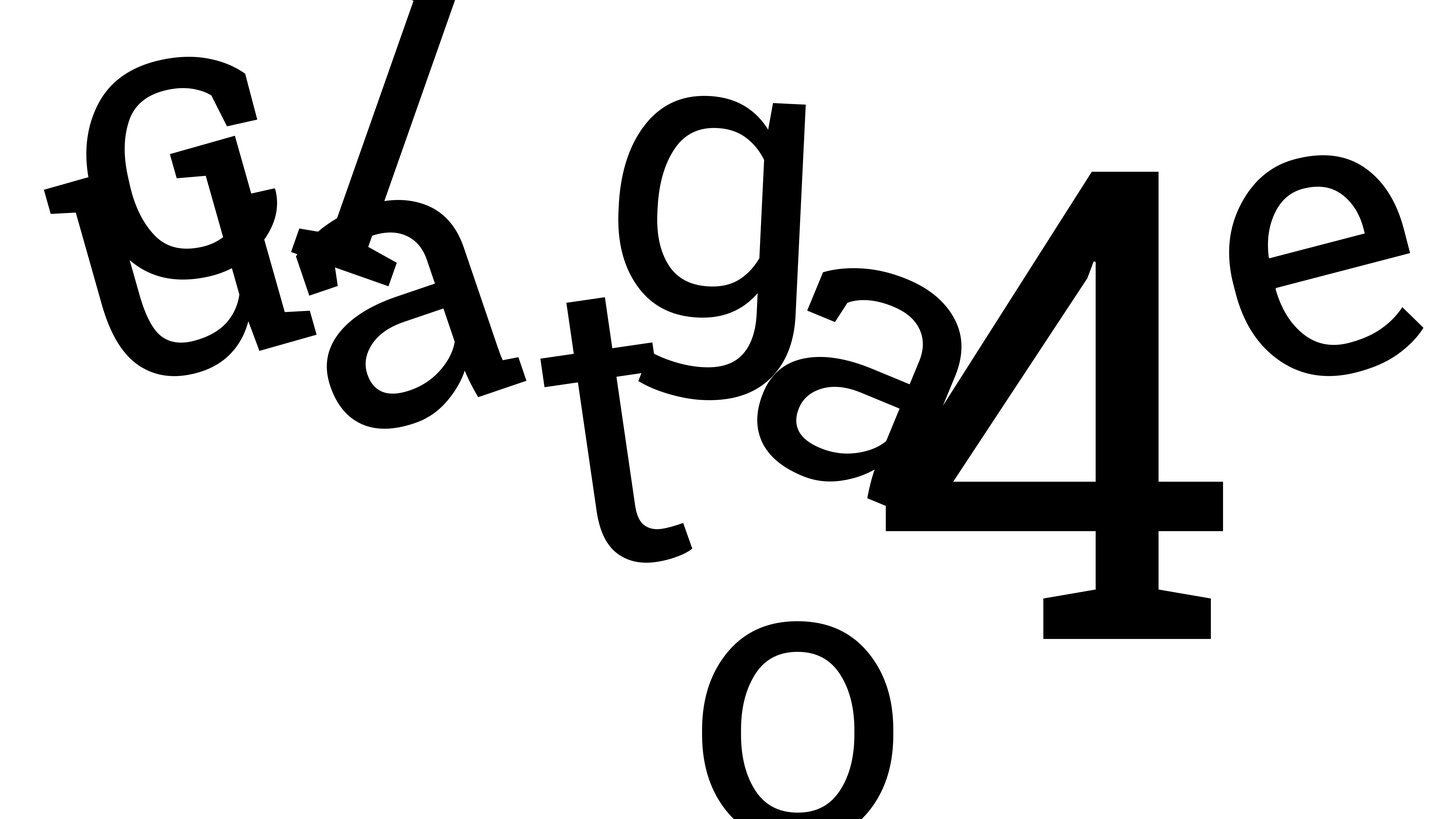
<style>
.page{position:relative;width:1456px;height:819px;background:#ffffff}
.page>*{position:absolute;margin:0}
.t1{font:404.4px "RobotoSlab-Regular";color:#000000}
.t2{font:657.2px "RobotoSlab-Regular";color:#000000}
</style>
<div class="page">
<p class="t1" style="left:86px;top:57px;width:191px;height:223px;rotate:-13deg">c</p>
<p class="t1" style="left:618px;top:96px;width:188px;height:304px;rotate:3deg">g</p>
<p class="t1" style="left:44px;top:136px;width:273px;height:240px;rotate:-16deg">u</p>
<p class="t1" style="left:1229px;top:155px;width:194px;height:221px;rotate:-15deg">e</p>
<p class="t2" style="left:886px;top:172px;width:337px;height:467px">4</p>
<p class="t1" style="left:296px;top:200px;width:231px;height:229px;rotate:-19deg">a</p>
<p class="t1" style="left:757px;top:268px;width:204px;height:250px;rotate:22deg">a</p>
<p class="t1" style="left:540px;top:297px;width:152px;height:266px;rotate:-8deg">t</p>
</div>
